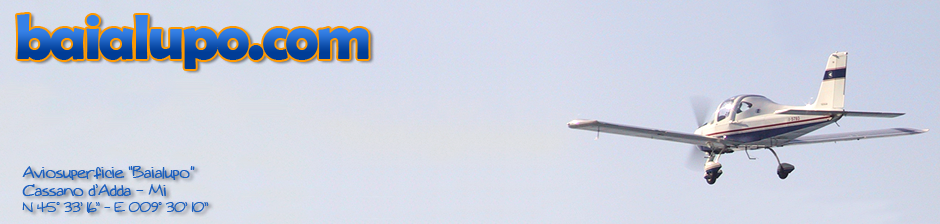
<style>
.page{position:relative;width:940px;height:224px}
.page>*{position:absolute;margin:0}
.t1{font:64.3px "BerlinSansFBDemi-Bold";letter-spacing:-0.05em}
.t2{font:15.7px "Augie";letter-spacing:-0.05em;color:#1b5fbf}
.t3{font:13.1px "Augie";letter-spacing:-0.05em;color:#1b5fbf}
</style>
<div class="page">
<p class="t1" style="left:17px;top:14px;width:352px;height:55px">baialupo.com</p>
<p class="t2" style="left:22px;top:166px;width:187px;height:47px">Aviosuperficie “Baialupo”<br>Cassano d’Adda - Mi<br><span class="t3">N 45° 33’ 16’’ - E 009° 30’ 10’’</span></p>
</div>
